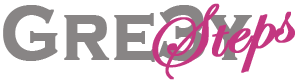
<style>
.page{position:relative;width:297px;height:81px;background:#ffffff}
.page>*{position:absolute;margin:0}
.t1{font:79.4px "CopperplateGothic-Bold";color:#898686;font-weight:bold;scale:0.87 1}
.t2{font:77.2px "EdwardianScriptITC";color:#c33780;font-weight:bold;scale:1.15 1}
</style>
<div class="page">
<p class="t1" style="left:3px;top:5px;width:249px;height:57px">Gre3y</p>
<p class="t2" style="left:152px;top:3px;width:143px;height:77px;rotate:-12deg">Steps</p>
</div>
